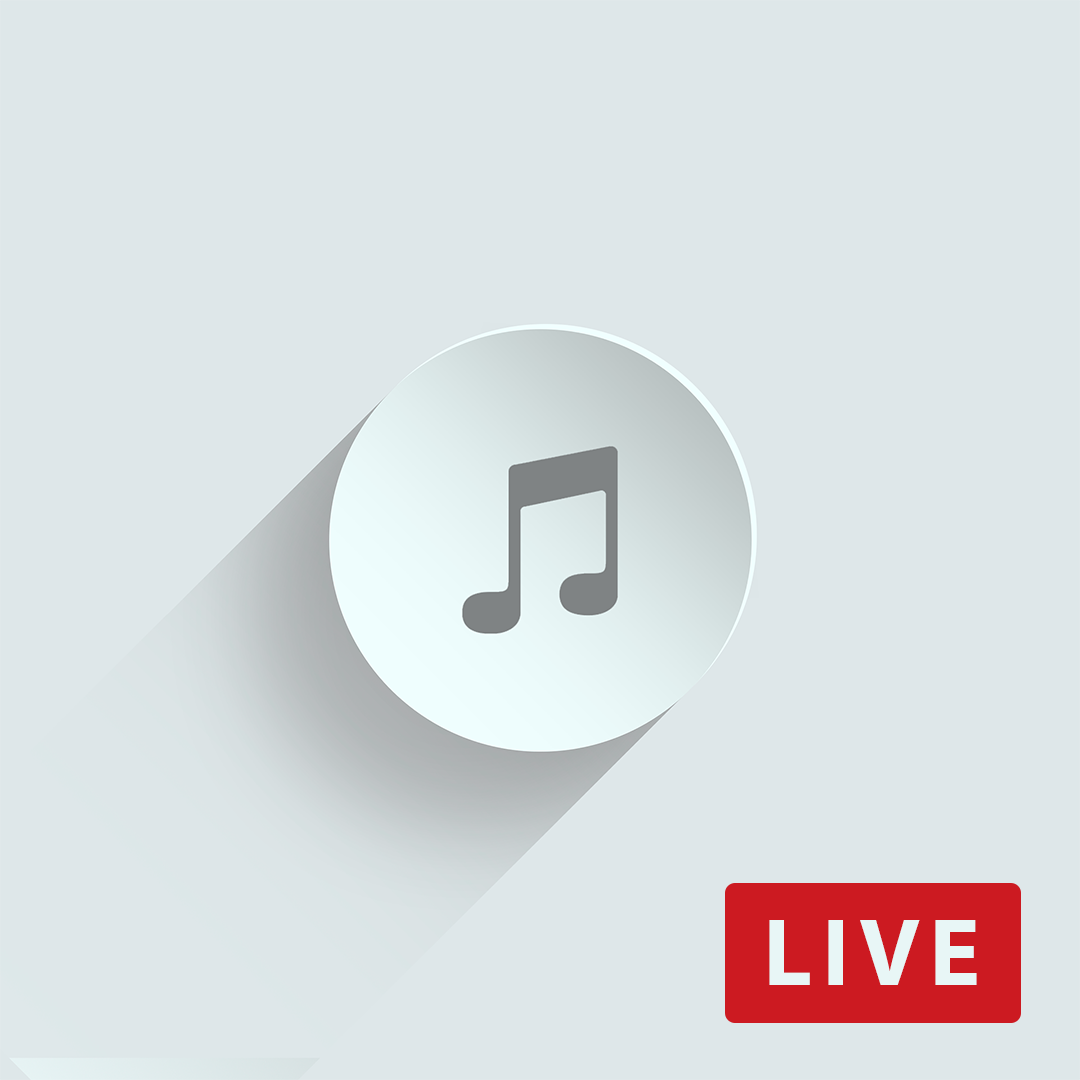
<style>
.page{position:relative;width:1080px;height:1080px;background:#dee7e9}
.page>*{position:absolute;margin:0}
.t1{font:95.8px "MyriadPro-Bold";letter-spacing:0.1em;color:#e8f6f6}
</style>
<div class="page">
<p class="t1" style="left:769px;top:920px;width:208px;height:65px">LIVE</p>
</div>
